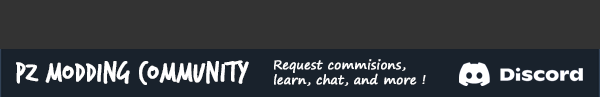
<style>
.page{position:relative;width:600px;height:97px;background:#333333}
.page>*{position:absolute;margin:0}
.t1{font:29.7px "TrashHand";color:#ffffff;font-weight:bold}
.t2{font:12.2px "SegoePrint";color:#ffffff;font-weight:bold}
</style>
<div class="page">
<p class="t1" style="left:16px;top:60px;width:233px;height:25px">PZ Modding COmmunity</p>
<p class="t2" style="left:274px;top:59px;width:152px;height:27px">Request commisions, <br>learn, chat, and more !</p>
</div>
